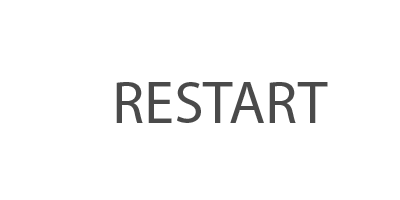
<style>
.page{position:relative;width:400px;height:200px;background:#ffffff}
.page>*{position:absolute;margin:0}
.t1{font:60px "MyriadPro-Regular";color:#4a4a4a}
</style>
<div class="page">
<p class="t1" style="left:116px;top:82px;width:212px;height:41px">RESTART</p>
</div>
